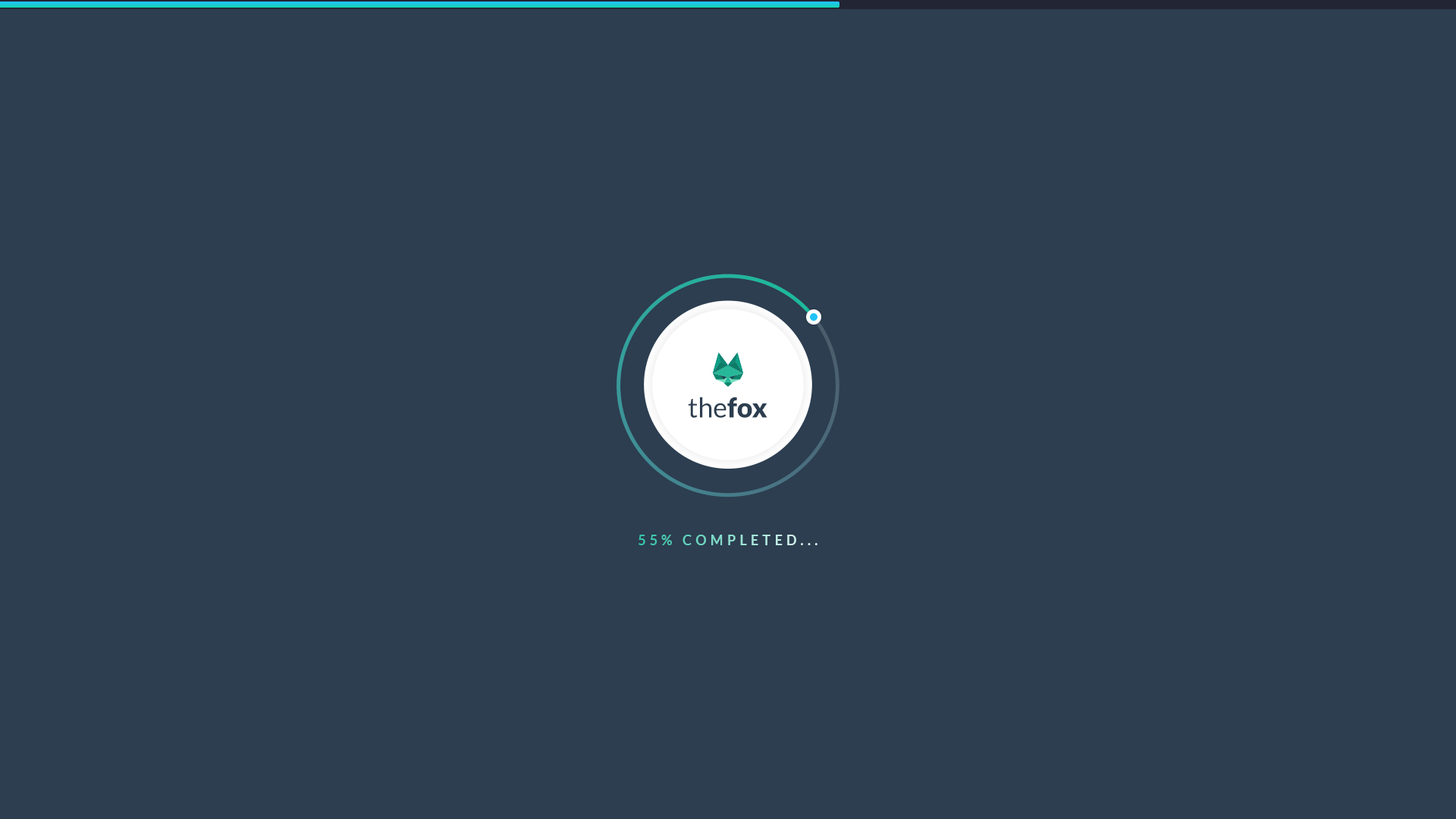
<style>
.page{position:relative;width:1456px;height:819px;background:#2c3e50}
.page>*{position:absolute;margin:0}
.t1{font:27.3px "Lato-Regular";color:#2c3e50}
.t2{font:27.3px "Lato-Black";color:#2c3e50}
.t3{font:13.6px "Lato-Bold";letter-spacing:0.3em}
</style>
<div class="page">
<p class="t1" style="left:688px;top:397px;width:79px;height:21px">the<span class="t2">fox</span></p>
<p class="t3" style="left:639px;top:535px;width:178px;height:10px">55% COMPLETED...</p>
</div>
